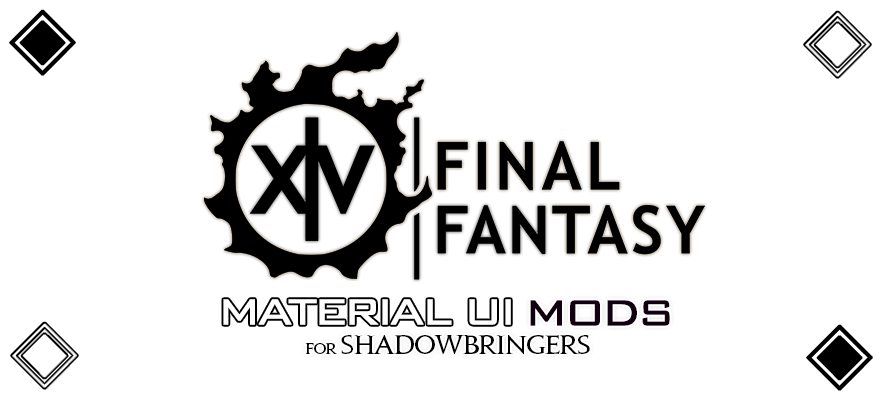
<style>
.page{position:relative;width:882px;height:400px;background:#ffffff}
.page>*{position:absolute;margin:0}
.t1{font:72px "Gulim";letter-spacing:-0.1em;color:#000000;font-weight:bold}
.t2{font:48px "BankGothic";letter-spacing:-0.1em;color:#ffffff;font-weight:bold}
.t3{font:24px "JupiterPro-Bold";letter-spacing:-0.05em;color:#000000}
.t4{font:48px "BankGothic";letter-spacing:-0.1em;color:#c71632;font-weight:bold}
.t5{font:48px "BankGothic";letter-spacing:-0.1em;color:#100010;font-weight:bold}
.t6{font:14px "JupiterPro-Bold";letter-spacing:-0.05em;color:#000000}
</style>
<div class="page">
<p class="t1" style="left:9px;top:9px;width:67px;height:67px">◈</p>
<p class="t2" style="left:223px;top:299px;width:288px;height:26px">MATERIAL UI</p>
<p class="t3" style="left:305px;top:300px;width:365px;height:55px;text-align:center"><span class="t4">                     </span><span class="t5">MODS<br></span><span class="t6">for </span>shadowbringers</p>
<p class="t1" style="left:806px;top:324px;width:67px;height:67px">◈</p>
</div>
